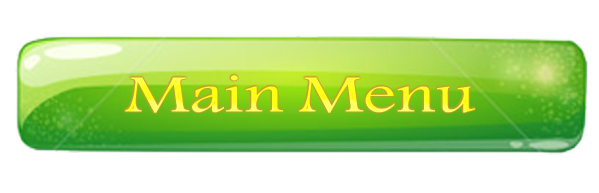
<style>
.page{position:relative;width:599px;height:193px;background:#ffffff}
.page>*{position:absolute;margin:0}
.t1{font:54.5px "K-Sina";scale:1.34 1}
</style>
<div class="page">
<p class="t1" style="left:125px;top:75px;width:350px;height:38px">Main Menu</p>
</div>
